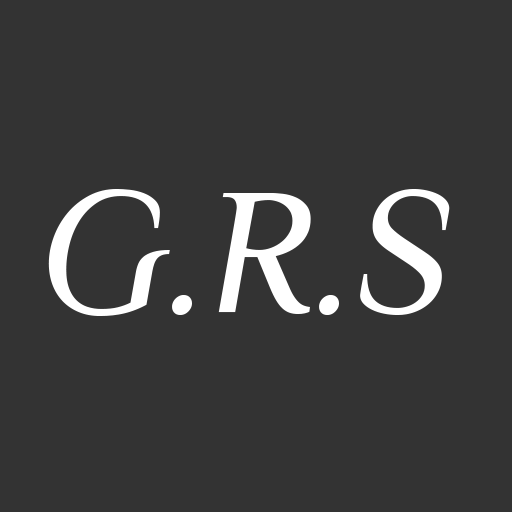
<style>
.page{position:relative;width:512px;height:512px;background:#333333}
.page>*{position:absolute;margin:0}
.t1{font:181.3px "Philosopher-Italic";color:#ffffff}
</style>
<div class="page">
<p class="t1" style="left:48px;top:189px;width:402px;height:127px">G.R.S</p>
</div>
